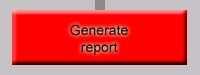
<style>
.page{position:relative;width:200px;height:75px;background:#ff0000}
.page>*{position:absolute;margin:0}
.t1{font:14px "ArialMT";color:#000000}
</style>
<div class="page">
<p class="t1" style="left:70px;top:24px;width:58px;height:31px;text-align:center">Generate<br>report</p>
</div>
